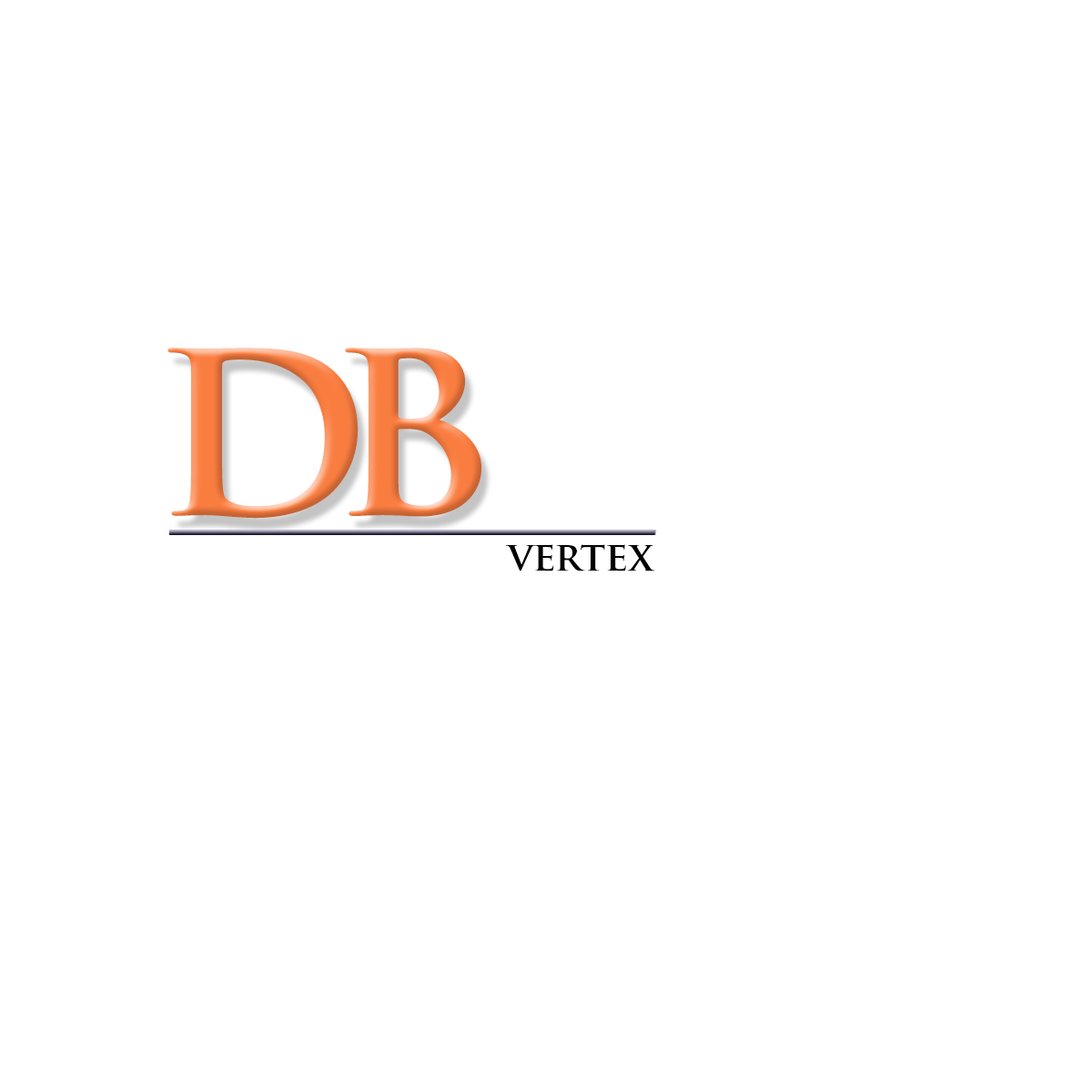
<style>
.page{position:relative;width:1092px;height:1092px;background:#ffffff}
.page>*{position:absolute;margin:0}
.t1{font:261.2px "TrajanPro-Bold";letter-spacing:-0.1em}
.t2{font:40px "TrajanPro-Bold";letter-spacing:-0.01em;color:#020202}
</style>
<div class="page">
<p class="t1" style="left:167px;top:348px;width:314px;height:171px">db</p>
<p class="t2" style="left:505px;top:544px;width:150px;height:27px">vertex</p>
</div>
